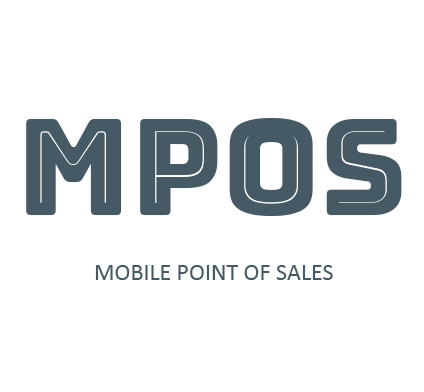
<style>
.page{position:relative;width:424px;height:392px;background:#ffffff}
.page>*{position:absolute;margin:0}
.t1{font:133.4px "BungeeInline-Regular";color:#455a64}
.t2{font:24px "Calibri";color:#455a64}
</style>
<div class="page">
<p class="t1" style="left:26px;top:118px;width:376px;height:98px">MPOS</p>
<p class="t2" style="left:95px;top:265px;width:238px;height:15px">MOBILE POINT OF SALES</p>
</div>
